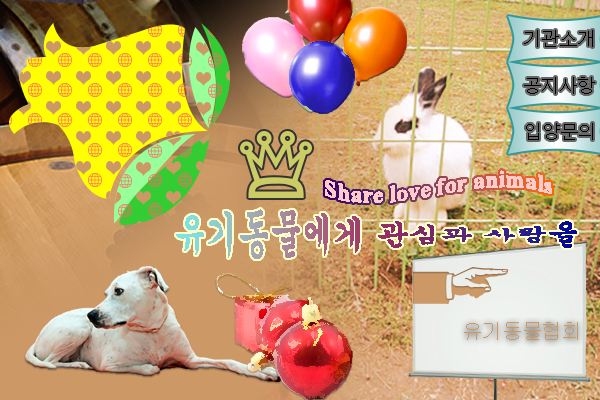
<style>
.page{position:relative;width:600px;height:400px}
.page>*{position:absolute;margin:0}
.t1{font:18px "Dotum";color:#000000}
.t2{font:24px "TimesNewRomanPS-BoldMT";color:#ffcccc}
.t3{font:32px "Gungsuh"}
.t4{font:20px "Gulim";color:#cc9966}
</style>
<div class="page">
<p class="t1" style="left:524px;top:30px;width:69px;height:17px">기관소개</p>
<p class="t1" style="left:524px;top:77px;width:71px;height:17px">공지사항</p>
<p class="t1" style="left:526px;top:123px;width:67px;height:17px">입양문의</p>
<p class="t2" style="left:325px;top:170px;width:227px;height:33px">Share love for animals</p>
<p class="t3" style="left:176px;top:209px;width:401px;height:50px">유기동물에게 관심과 사랑을</p>
<p class="t4" style="left:464px;top:322px;width:114px;height:18px">유기동물협회</p>
</div>
